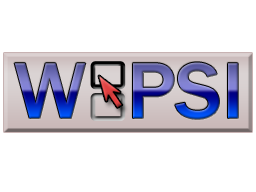
<style>
.page{position:relative;width:256px;height:192px;background:#ffffff}
.page>*{position:absolute;margin:0}
.t1{font:82px "FranklinGothic-Medium"}
</style>
<div class="page">
<p class="t1" style="left:14px;top:62px;width:224px;height:57px">W  PSI</p>
</div>
